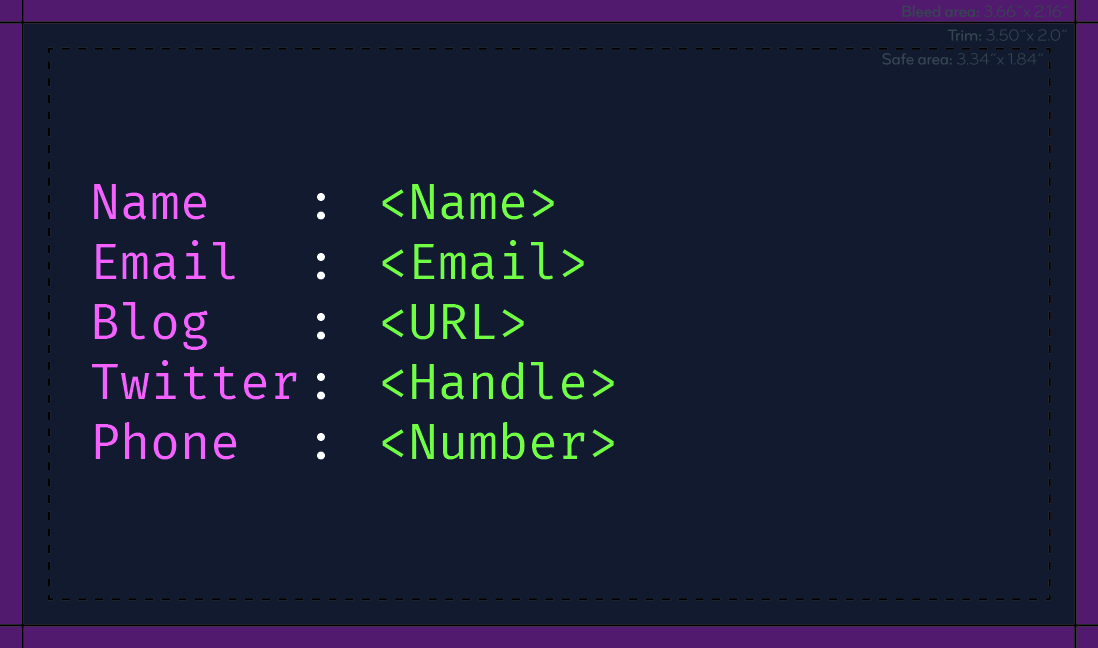
<style>
.page{position:relative;width:1098px;height:648px;background:#121a30}
.page>*{position:absolute;margin:0}
.t1{font:50px "FiraCode-Regular";color:#70ff43}
.t2{font:50px "FiraCode-Regular";color:#f561ff}
.t3{font:50px "FiraCode-Regular";color:#ffffff}
</style>
<div class="page">
<p class="t1" style="left:92px;top:184px;width:522px;height:276px"><span class="t2">Name</span><span class="t3">   :  </span>&lt;Name&gt;<br><span class="t2">Email</span><span class="t3">  :  </span>&lt;Email&gt;<br><span class="t2">Blog </span><span class="t3">  :  </span>&lt;URL&gt;<br><span class="t2">Twitter</span><span class="t3"> :  </span>&lt;Handle&gt;<br><span class="t2">Phone  </span><span class="t3">:</span>  &lt;Number&gt;</p>
</div>
